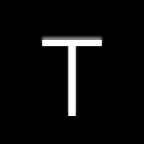
<style>
.page{position:relative;width:144px;height:144px;background:#000000}
.page>*{position:absolute;margin:0}
.t1{font:107.8px "Avenir-Light";color:#ffffff}
</style>
<div class="page">
<p class="t1" style="left:42px;top:40px;width:60px;height:76px">T</p>
</div>
